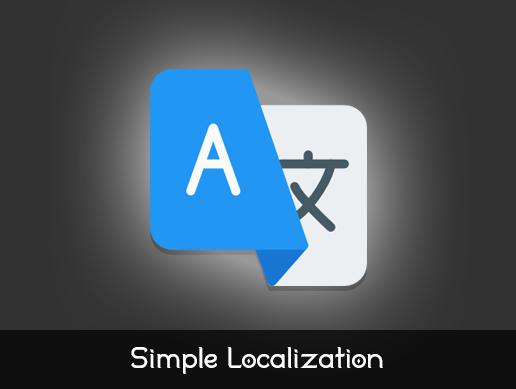
<style>
.page{position:relative;width:516px;height:389px}
.page>*{position:absolute;margin:0}
.t1{font:30px "Duralith";color:#ffffff}
</style>
<div class="page">
<p class="t1" style="left:131px;top:347px;width:252px;height:27px">Simple Localization</p>
</div>
